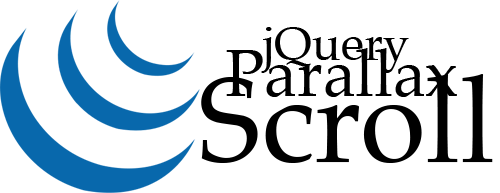
<style>
.page{position:relative;width:500px;height:193px;background:#ffffff}
.page>*{position:absolute;margin:0}
.t1{font:48px "Palatino-Roman";color:#000000}
.t2{font:65px "Palatino-Roman";color:#000000}
.t3{font:120px "Palatino-Roman";color:#000000}
</style>
<div class="page">
<p class="t1" style="left:261px;top:27px;width:148px;height:46px">jQuery</p>
<p class="t2" style="left:226px;top:48px;width:231px;height:49px">Parallax</p>
<p class="t3" style="left:201px;top:74px;width:292px;height:89px">Scroll</p>
</div>
